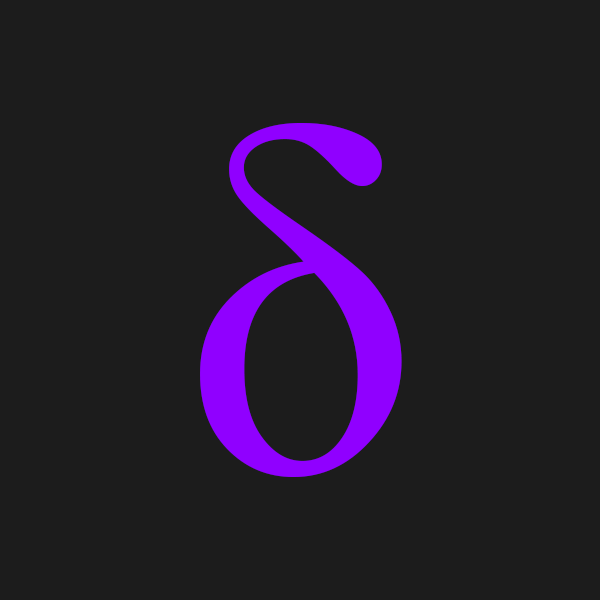
<style>
.page{position:relative;width:600px;height:600px;background:#1c1c1c}
.page>*{position:absolute;margin:0}
.t1{font:500px "TimesNewRomanPSMT";color:#9000ff}
</style>
<div class="page">
<p class="t1" style="left:200px;top:123px;width:202px;height:354px">δ</p>
</div>
